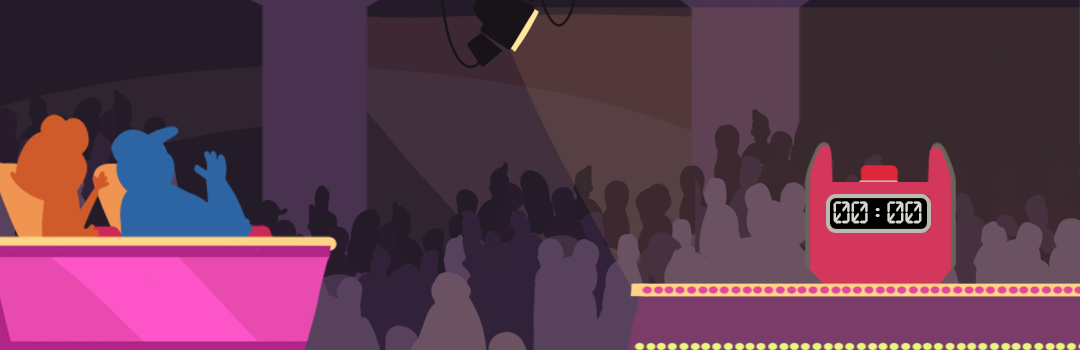
<style>
.page{position:relative;width:1080px;height:350px}
.page>*{position:absolute;margin:0}
.t1{font:22.2px "Digitaldream";color:#d2d2d2}
</style>
<div class="page">
<p class="t1" style="left:833px;top:201px;width:89px;height:23px">00:00</p>
</div>
